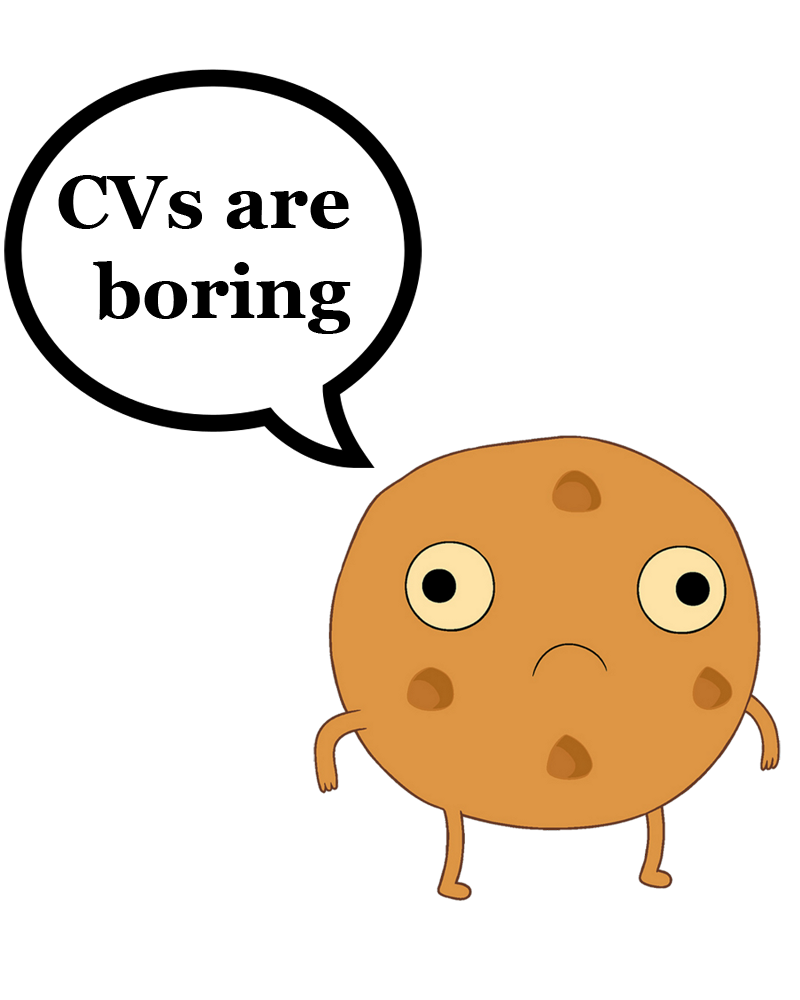
<style>
.page{position:relative;width:800px;height:1000px;background:#ffffff}
.page>*{position:absolute;margin:0}
.t1{font:75px "Georgia-Bold";color:#000000}
</style>
<div class="page">
<p class="t1" style="left:58px;top:175px;width:293px;height:159px">CVs are <br>  boring</p>
</div>
